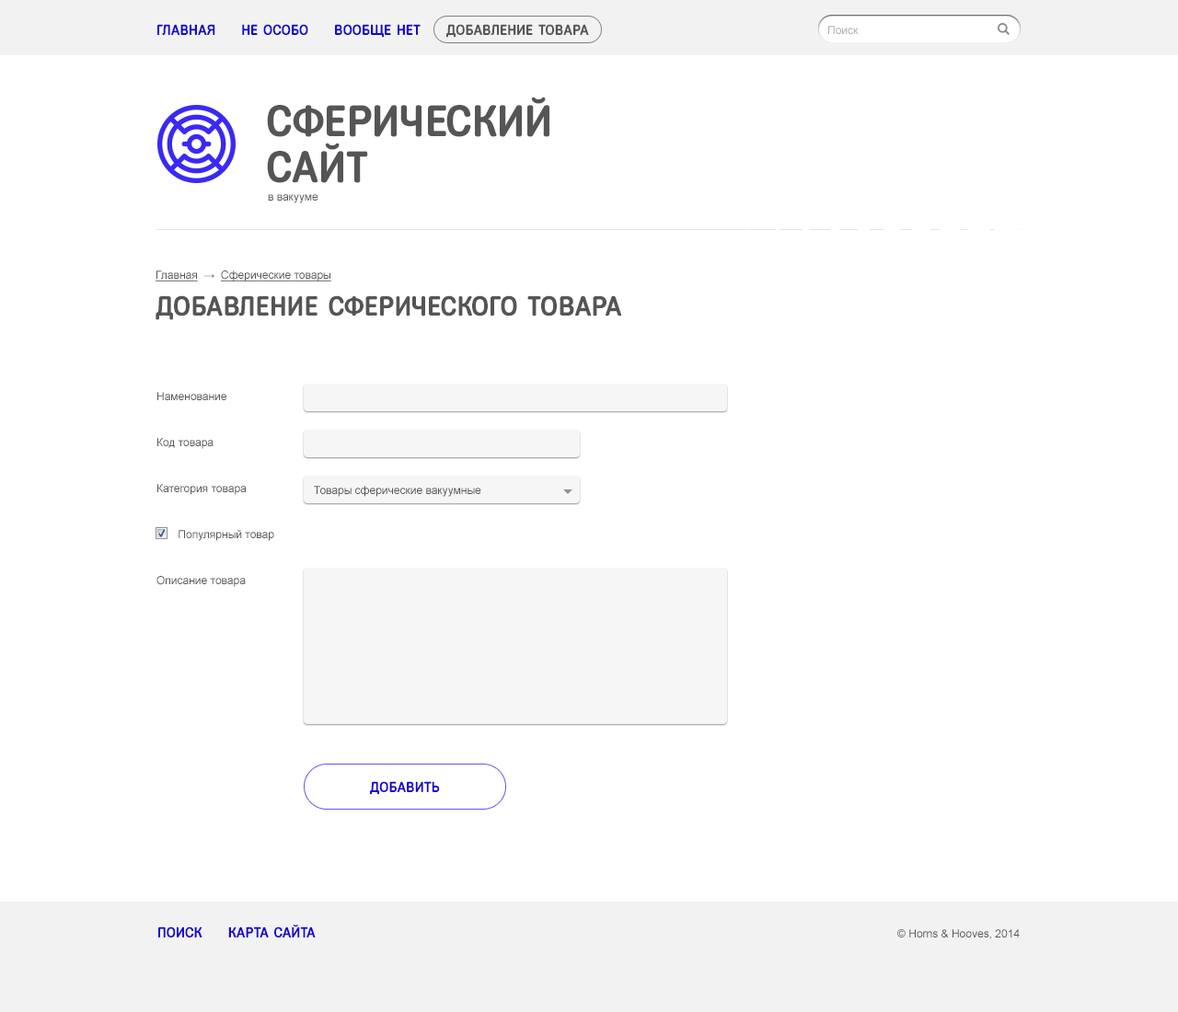
<style>
.page{position:relative;width:1178px;height:1012px;background:#ffffff}
.page>*{position:absolute;margin:0}
.t1{font:14.7px "Fregat-Bold";color:#1a09c9;text-transform:uppercase}
.t2{font:14.7px "Fregat-Bold";color:#555555;text-transform:uppercase}
.t3{font:11px "ArialMT";color:#ababab}
.t4{font:44.2px/46px "Fregat-Bold";color:#555555;text-transform:uppercase}
.t5{font:11px/18.4px "ArialMT";color:#555555}
.t6{font:27.6px/27.6px "Fregat-Bold";color:#555555;text-transform:uppercase}
.t7{font:11px/27.6px "ArialMT";color:#555555;text-decoration:underline}
.t8{font:11px/27.6px "ArialMT";color:#555555}
.t9{font:11px "ArialMT";color:#555555}
</style>
<div class="page">
<p class="t1" style="left:157px;top:24px;width:432px;height:14px">Главная     Не особо     Вообще нет     <span class="t2">Добавление товара</span></p>
<p class="t3" style="left:828px;top:26px;width:31px;height:8px">Поиск</p>
<p class="t4" style="left:267px;top:97px;width:282px;height:106px">Сферический<br>сайт<br><span class="t5">в вакууме</span></p>
<p class="t6" style="left:156px;top:271px;width:466px;height:49px"><span class="t7">Главная</span><span class="t8">  →  </span><span class="t7">Сферические товары<br></span>Добавление сферического товара</p>
<p class="t5" style="left:156px;top:392px;width:118px;height:195px">Наменование<br>Код товара<br>Категория товара<br>       Популярный товар<br>Описание товара</p>
<p class="t9" style="left:314px;top:486px;width:167px;height:11px">Товары сферические вакуумные</p>
<p class="t1" style="left:370px;top:781px;width:70px;height:14px">Добавить</p>
<p class="t1" style="left:158px;top:925px;width:158px;height:13px">поиск     Карта сайта</p>
<p class="t9" style="left:897px;top:929px;width:123px;height:11px">© Horns &amp; Hooves, 2014</p>
</div>
